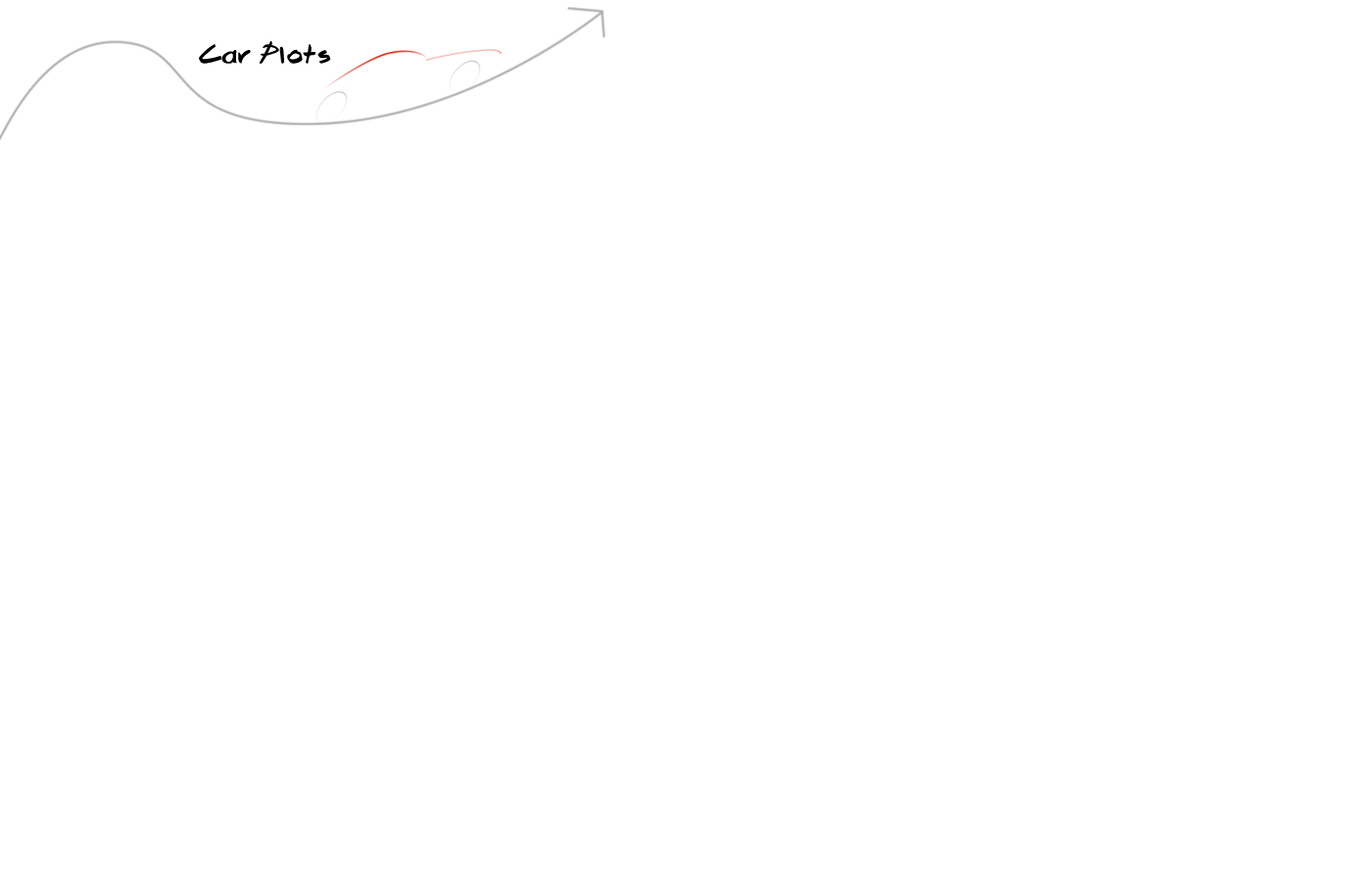
<style>
.page{position:relative;width:1352px;height:882px;background:#ffffff}
.page>*{position:absolute;margin:0}
.t1{font:29.4px "Brook23";color:#000000}
</style>
<div class="page">
<p class="t1" style="left:199px;top:41px;width:132px;height:23px">Car Plots</p>
</div>
